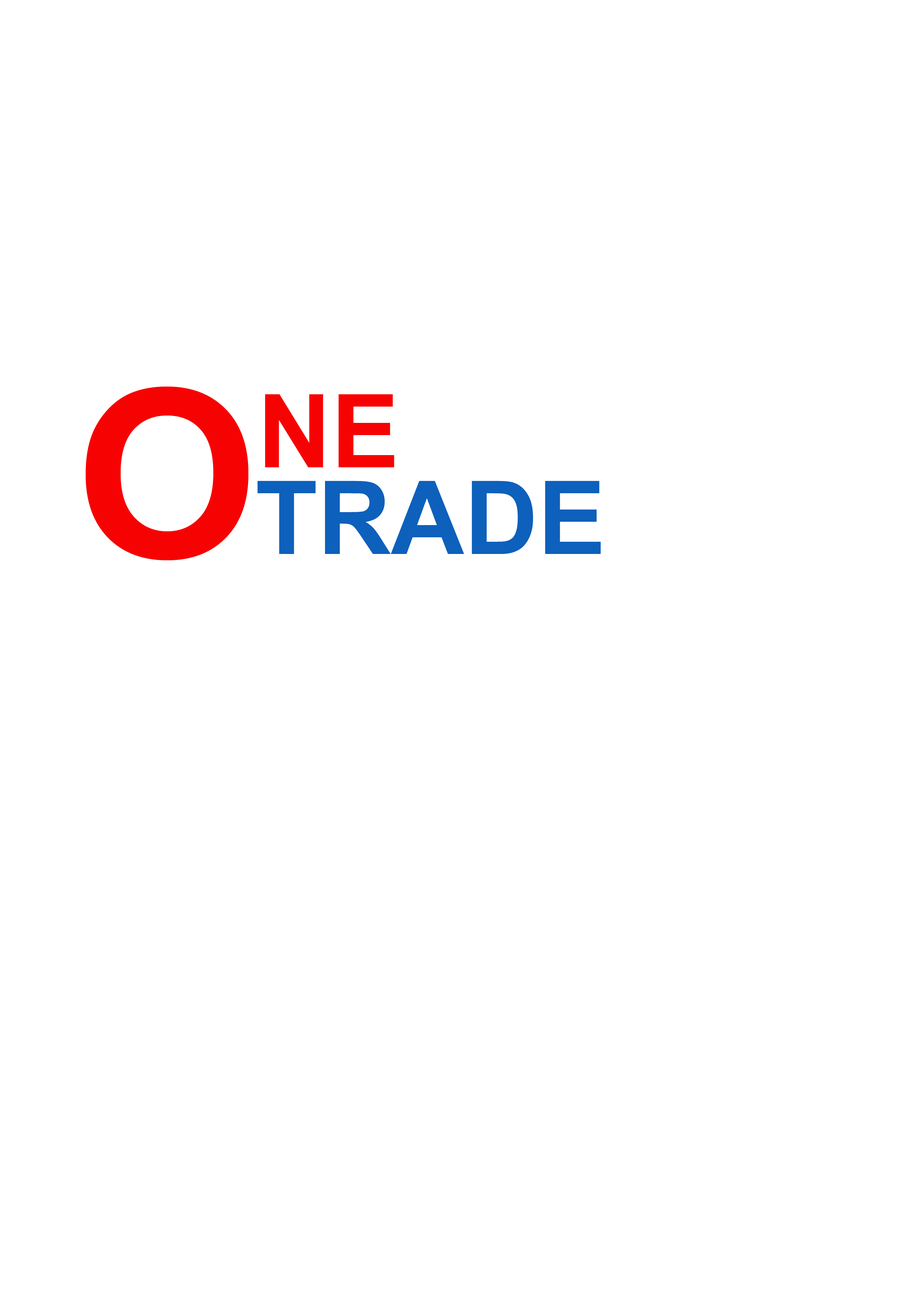
<style>
.page{position:relative;width:918px;height:1299px;background:#ffffff}
.page>*{position:absolute;margin:0}
.t1{font:234.2px "Arial-BoldMT";color:#f70202}
.t2{font:101.7px "Arial-BoldMT";color:#f70202}
.t3{font:101.7px "Arial-BoldMT";color:#0d60bc}
</style>
<div class="page">
<p class="t1" style="left:86px;top:386px;width:162px;height:174px">O</p>
<p class="t2" style="left:265px;top:394px;width:129px;height:73px">NE</p>
<p class="t3" style="left:257px;top:481px;width:344px;height:73px">TRADE</p>
</div>
